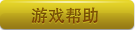
<style>
.page{position:relative;width:135px;height:30px}
.page>*{position:absolute;margin:0}
.t1{font:17px "AdobeHeitiStd-Regular";color:#7d5105}
</style>
<div class="page">
<p class="t1" style="left:31px;top:7px;width:67px;height:17px">游戏帮助</p>
</div>
